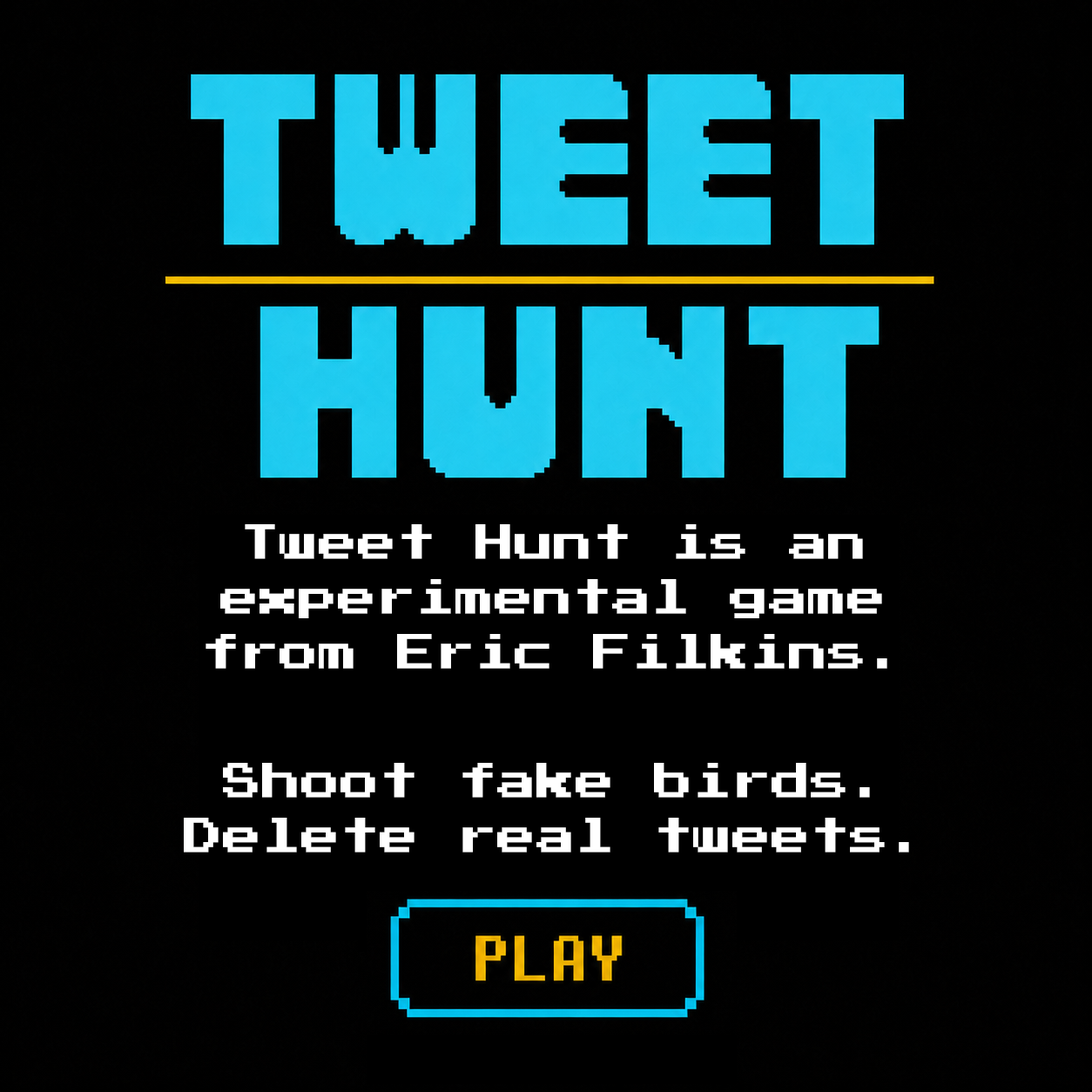
<style>
.page{position:relative;width:1092px;height:1092px;background:#000000}
.page>*{position:absolute;margin:0}
.t1{font:39.2px/54.9px "PressStart2P";color:#ffffff}
</style>
<div class="page">
<p class="t1" style="left:206px;top:524px;width:681px;height:145px;text-align:center">Tweet Hunt is an<br>experimental game<br>from Eric Filkins.</p>
<p class="t1" style="left:184px;top:763px;width:725px;height:90px;text-align:center">Shoot fake birds.<br>Delete real tweets.</p>
</div>
